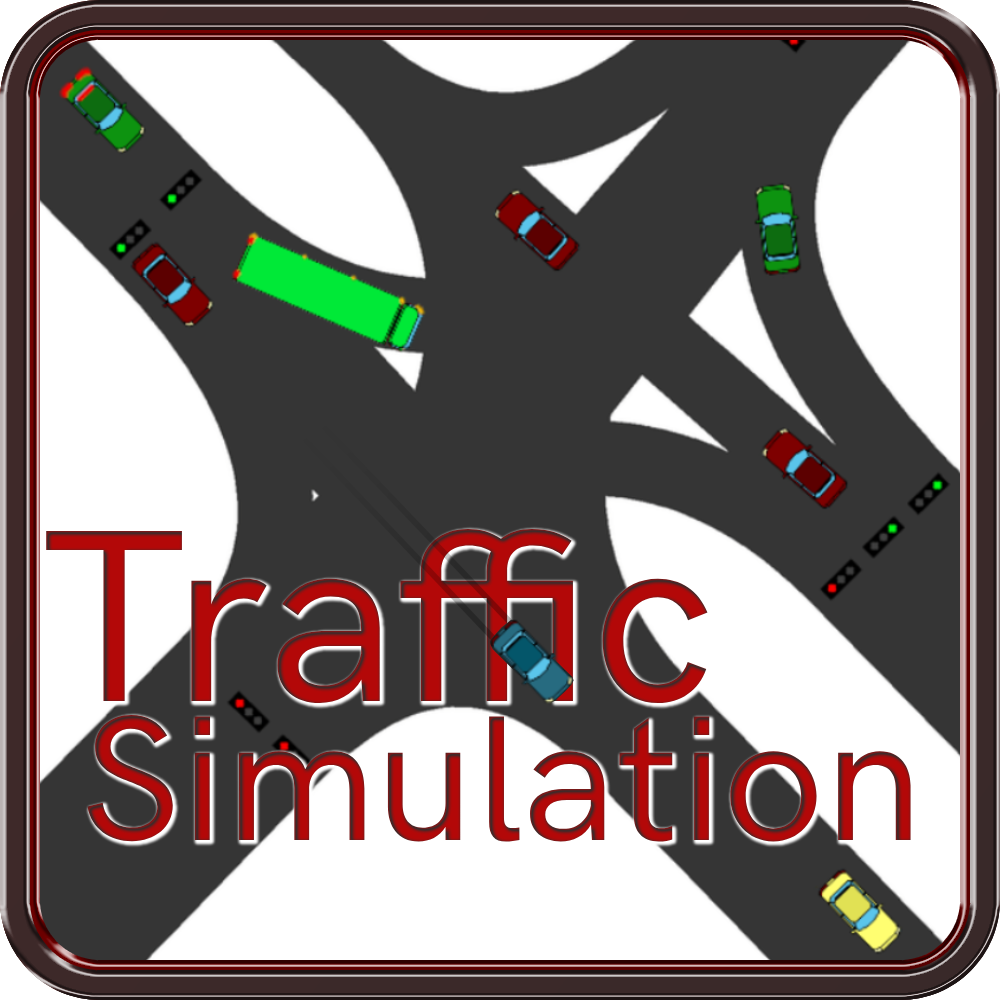
<style>
.page{position:relative;width:1000px;height:1000px;background:#353535}
.page>*{position:absolute;margin:0}
.t1{font:246.4px "HKGrotesk-MediumLegacy"}
.t2{font:179.1px "HKGrotesk-MediumLegacy"}
</style>
<div class="page">
<p class="t1" style="left:46px;top:529px;width:662px;height:174px">Traffic</p>
<p class="t2" style="left:87px;top:715px;width:824px;height:127px">Simulation</p>
</div>
